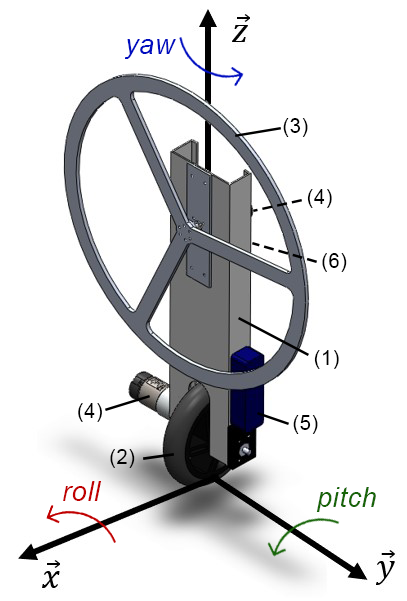
<style>
.page{position:relative;width:407px;height:601px;background:#ffffff}
.page>*{position:absolute;margin:0}
.t1{font:26.7px "Arial-ItalicMT";letter-spacing:0.03em;color:#000dc0}
.t2{font:20px "ArialMT";letter-spacing:0.03em;color:#000000}
.t3{font:26.7px "Arial-ItalicMT";letter-spacing:0.03em;color:#c00000}
.t4{font:26.7px "Arial-ItalicMT";letter-spacing:0.03em;color:#186508}
</style>
<div class="page">
<p class="t1" style="left:125px;top:39px;width:51px;height:20px">yaw</p>
<p class="t2" style="left:283px;top:118px;width:25px;height:19px">(3)</p>
<p class="t2" style="left:307px;top:189px;width:25px;height:19px">(4)</p>
<p class="t2" style="left:322px;top:253px;width:25px;height:19px">(6)</p>
<p class="t2" style="left:314px;top:350px;width:25px;height:19px">(1)</p>
<p class="t2" style="left:78px;top:403px;width:24px;height:19px">(4)</p>
<p class="t2" style="left:293px;top:415px;width:25px;height:19px">(5)</p>
<p class="t2" style="left:110px;top:449px;width:25px;height:19px">(2)</p>
<p class="t3" style="left:63px;top:481px;width:38px;height:20px">roll</p>
<p class="t4" style="left:316px;top:487px;width:60px;height:25px">pitch</p>
</div>
